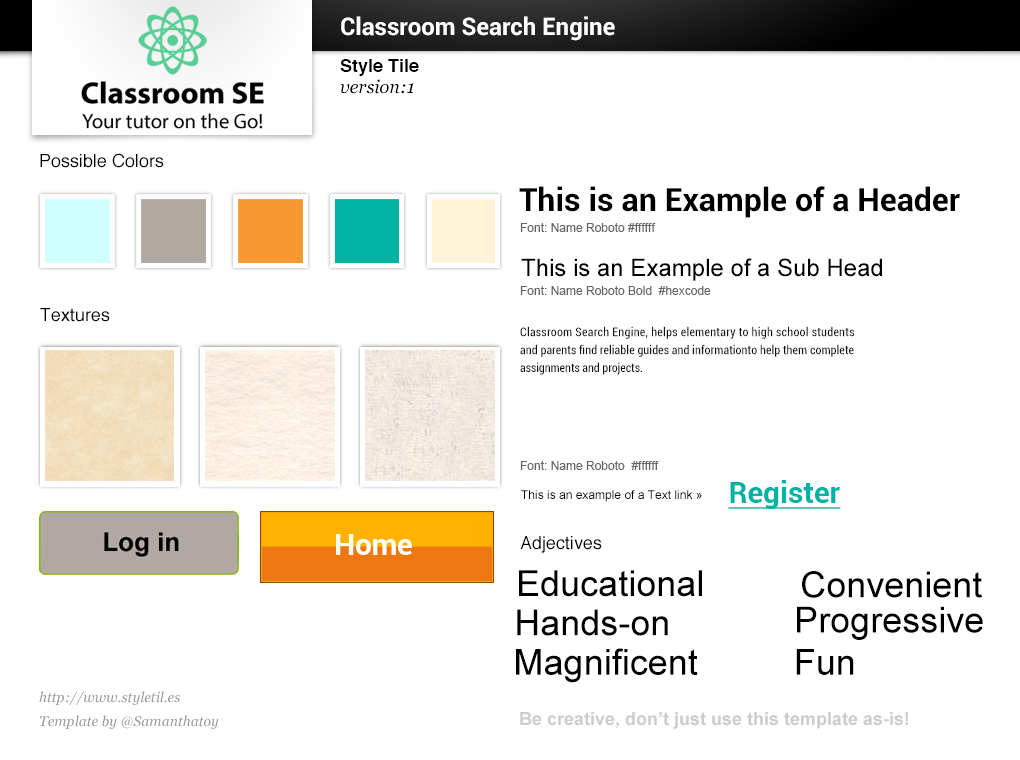
<style>
.page{position:relative;width:1020px;height:760px;background:#ffffff}
.page>*{position:absolute;margin:0}
.t1{font:24px "Roboto-Bold";color:#ffffff}
.t2{font:18px "Helvetica-Bold";color:#000000}
.t3{font:18px "Georgia-Italic";color:#000000}
.t4{font:18px "Helvetica";color:#000000}
.t5{font:32px "Roboto-Bold";color:#000000}
.t6{font:12px "ArialMT";color:#666666}
.t7{font:24px "ArialMT";color:#000000}
.t8{font:12.4px/18px "Roboto-Condensed";letter-spacing:0.006em;color:#111111}
.t9{font:12.4px/18px "Roboto-Condensed";letter-spacing:0.022em;color:#111111}
.t10{font:12.4px/18px "Roboto-Condensed";letter-spacing:-0.003em;color:#111111}
.t11{font:30px "Roboto-Bold";color:#00b3a2;text-decoration:underline}
.t12{font:12px "ArialMT";color:#000000}
.t13{font:36px "ArialMT";color:#000000}
.t14{font:14px/24px "Georgia-Italic";color:#999999}
.t15{font:18px "Arial-BoldMT";color:#cccccc}
</style>
<div class="page">
<p class="t1" style="left:341px;top:16px;width:274px;height:25px">Classroom Search Engine</p>
<p class="t2" style="left:340px;top:59px;width:79px;height:17px">Style Tile</p>
<p class="t3" style="left:340px;top:79px;width:74px;height:15px">version:1</p>
<p class="t4" style="left:40px;top:153px;width:124px;height:15px">Possible Colors</p>
<p class="t5" style="left:519px;top:186px;width:441px;height:32px">This is an Example of a Header</p>
<p class="t6" style="left:520px;top:223px;width:136px;height:9px">Font: Name Roboto #ffffff</p>
<p class="t7" style="left:521px;top:258px;width:361px;height:23px">This is an Example of a Sub Head</p>
<p class="t6" style="left:520px;top:286px;width:191px;height:9px">Font: Name Roboto Bold  #hexcode</p>
<p class="t4" style="left:40px;top:308px;width:70px;height:14px">Textures</p>
<p class="t8" style="left:520px;top:326px;width:334px;height:49px"><span class="t9">Classroom Search Engine, helps elementary to high school students  <br></span>and parents find reliable guides and informationto help them complete<span class="t10"> <br>assignments and projects.</span></p>
<p class="t6" style="left:520px;top:461px;width:139px;height:9px">Font: Name Roboto  #ffffff</p>
<p class="t11" style="left:728px;top:480px;width:113px;height:29px">Register</p>
<p class="t12" style="left:521px;top:490px;width:181px;height:12px">This is an example of a Text link »</p>
<p class="t4" style="left:520px;top:536px;width:82px;height:17px">Adjectives</p>
<p class="t13" style="left:519px;top:570px;width:183px;height:27px">Educational</p>
<p class="t13" style="left:802px;top:571px;width:180px;height:27px">Convenient</p>
<p class="t13" style="left:797px;top:606px;width:186px;height:34px">Progressive</p>
<p class="t13" style="left:517px;top:609px;width:151px;height:27px">Hands-on</p>
<p class="t13" style="left:516px;top:648px;width:182px;height:35px">Magnificent</p>
<p class="t13" style="left:796px;top:649px;width:58px;height:26px">Fun</p>
<p class="t14" style="left:39px;top:691px;width:180px;height:38px">http://www.styletil.es<br>Template by @Samanthatoy</p>
<p class="t15" style="left:520px;top:712px;width:388px;height:17px">Be creative, don’t just use this template as-is!</p>
</div>
